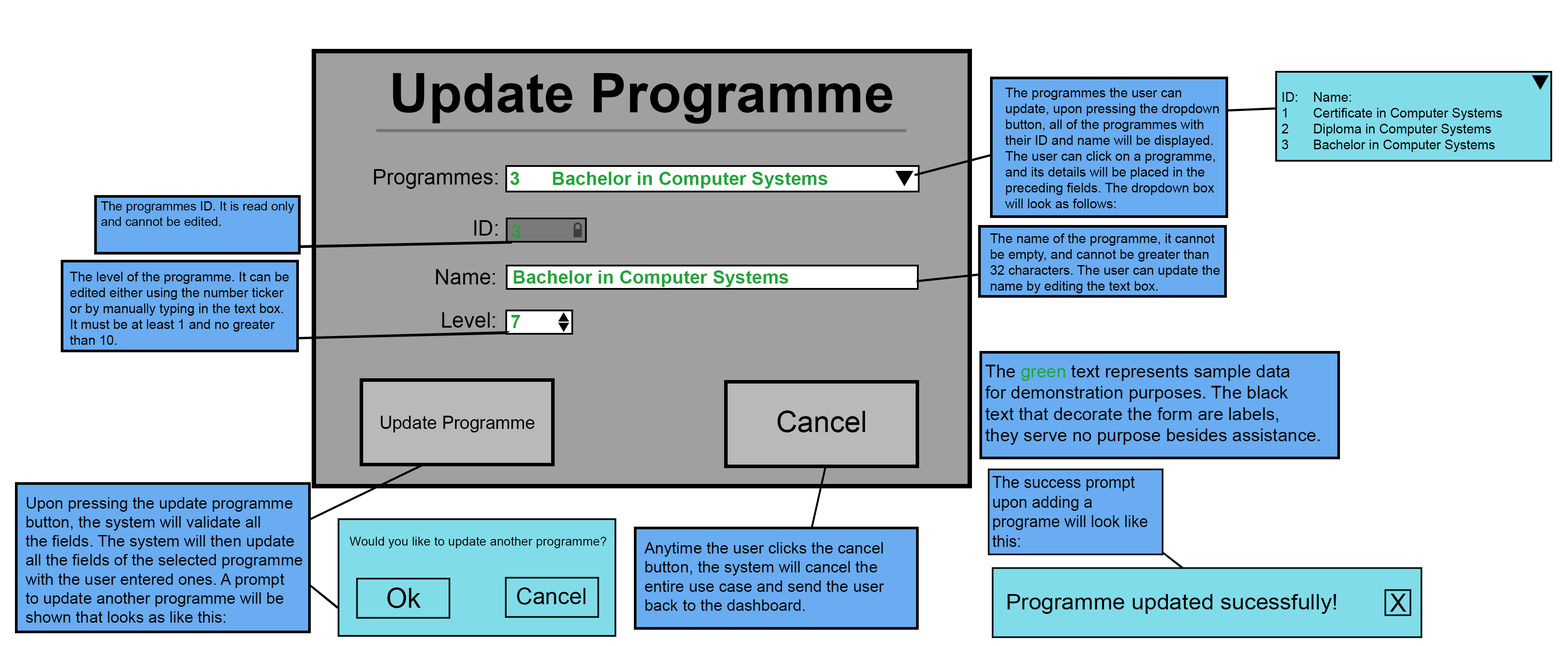
<style>
.page{position:relative;width:1568px;height:646px;background:#ffffff}
.page>*{position:absolute;margin:0}
.t1{font:54.8px "Arial-BoldMT";color:#000000}
.t2{font:13.2px "ArialMT";color:#000000}
.t3{font:21.1px "ArialMT";color:#000000}
.t4{font:18.6px "Arial-BoldMT";color:#21a439}
.t5{font:12.6px "ArialMT";color:#000000}
.t6{font:21.2px "ArialMT";color:#000000}
.t7{font:17.8px "ArialMT";color:#000000}
.t8{font:17.8px "ArialMT";color:#21a439}
.t9{font:29.4px "ArialMT";color:#000000}
.t10{font:16.4px "ArialMT";color:#000000;scale:0.97 1}
.t11{font:15.9px "ArialMT";color:#000000}
.t12{font:12.5px "ArialMT";color:#000000}
.t13{font:27.1px "ArialMT";color:#000000}
.t14{font:22.7px "ArialMT";color:#000000}
.t15{font:21.6px "ArialMT";color:#000000;scale:1.06 1}
.t16{font:25.1px "ArialMT";color:#000000}
</style>
<div class="page">
<p class="t1" style="left:393px;top:73px;width:499px;height:51px">Update Programme</p>
<p class="t2" style="left:1005px;top:88px;width:214px;height:120px">The programmes the user can<br>update, upon pressing the dropdown<br>button, all of the programmes with<br>their ID and name will be displayed.<br>The user can click on a programme,<br>and its details will be placed in the <br>preceding fields. The dropdown box<br>will look as follows:</p>
<p class="t2" style="left:1281px;top:92px;width:221px;height:60px">ID: Name:<br>1  Certificate in Computer Systems<br>2  Diploma in Computer Systems<br>3  Bachelor in Computer Systems</p>
<p class="t3" style="left:374px;top:169px;width:124px;height:20px">Programmes:</p>
<p class="t4" style="left:510px;top:172px;width:318px;height:16px">3   Bachelor in Computer Systems</p>
<p class="t5" style="left:101px;top:201px;width:193px;height:25px">The programmes ID. It is read only<br>and cannot be edited.</p>
<p class="t3" style="left:474px;top:220px;width:24px;height:16px">ID:</p>
<p class="t4" style="left:512px;top:225px;width:9px;height:13px">3</p>
<p class="t2" style="left:990px;top:233px;width:230px;height:60px">The name of the programme, it cannot <br>be empty, and cannot be greater than<br>32 characters. The user can update the<br>name by editing the text box.</p>
<p class="t6" style="left:436px;top:269px;width:59px;height:15px">Name:</p>
<p class="t2" style="left:70px;top:272px;width:219px;height:73px">The level of the programme. It can be<br>edited either using the number ticker<br>or by manually typing in the text box.<br>It must be at least 1 and no greater<br>than 10.</p>
<p class="t4" style="left:514px;top:270px;width:274px;height:17px">Bachelor in Computer Systems</p>
<p class="t6" style="left:442px;top:312px;width:53px;height:16px">Level:</p>
<p class="t4" style="left:511px;top:315px;width:9px;height:13px">7</p>
<p class="t7" style="left:985px;top:364px;width:335px;height:81px">The <span class="t8">green </span>text represents sample data<br>for demonstration purposes. The black<br>text that decorate the form are labels,<br>they serve no purpose besides assistance.</p>
<p class="t9" style="left:777px;top:410px;width:88px;height:22px">Cancel</p>
<p class="t7" style="left:381px;top:416px;width:153px;height:16px">Update Programme</p>
<p class="t10" style="left:992px;top:476px;width:156px;height:71px">The success prompt<br>upon adding a<br>programe will look like <br>this:</p>
<p class="t11" style="left:26px;top:497px;width:276px;height:125px">Upon pressing the update programme<br>button, the system will validate all<br>the fields. The system will then update<br>all the fields of the selected programme <br>with the user entered ones. A prompt<br>to update another programme will be<br>shown that looks as like this:</p>
<p class="t12" style="left:350px;top:537px;width:257px;height:11px">Would you like to update another programme?</p>
<p class="t11" style="left:644px;top:542px;width:240px;height:69px">Anytime the user clicks the cancel<br>button, the system will cancel the<br>entire use case and send the user <br>back to the dashboard.</p>
<p class="t13" style="left:387px;top:587px;width:34px;height:21px">Ok</p>
<p class="t14" style="left:517px;top:587px;width:68px;height:17px">Cancel</p>
<p class="t15" style="left:1008px;top:594px;width:328px;height:20px">Programme updated sucessfully!</p>
<p class="t16" style="left:1390px;top:593px;width:16px;height:18px">X</p>
</div>
